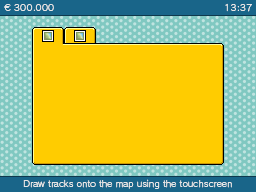
<style>
.page{position:relative;width:256px;height:192px;background:#ffcc00}
.page>*{position:absolute;margin:0}
.t1{font:9px "RodinBokutohPro-M";color:#e6e6e6}
</style>
<div class="page">
<p class="t1" style="left:4px;top:4px;width:50px;height:7px">€ 300.000</p>
<p class="t1" style="left:225px;top:3px;width:27px;height:9px">13:37</p>
<p class="t1" style="left:23px;top:179px;width:209px;height:10px">Draw tracks onto the map using the touchscreen</p>
</div>
